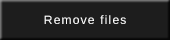
<style>
.page{position:relative;width:170px;height:40px;background:#1d1d1d}
.page>*{position:absolute;margin:0}
.t1{font:12px "LiberationSans";letter-spacing:0.1em;color:#ffffff}
</style>
<div class="page">
<p class="t1" style="left:44px;top:15px;width:82px;height:9px">Remove files</p>
</div>
